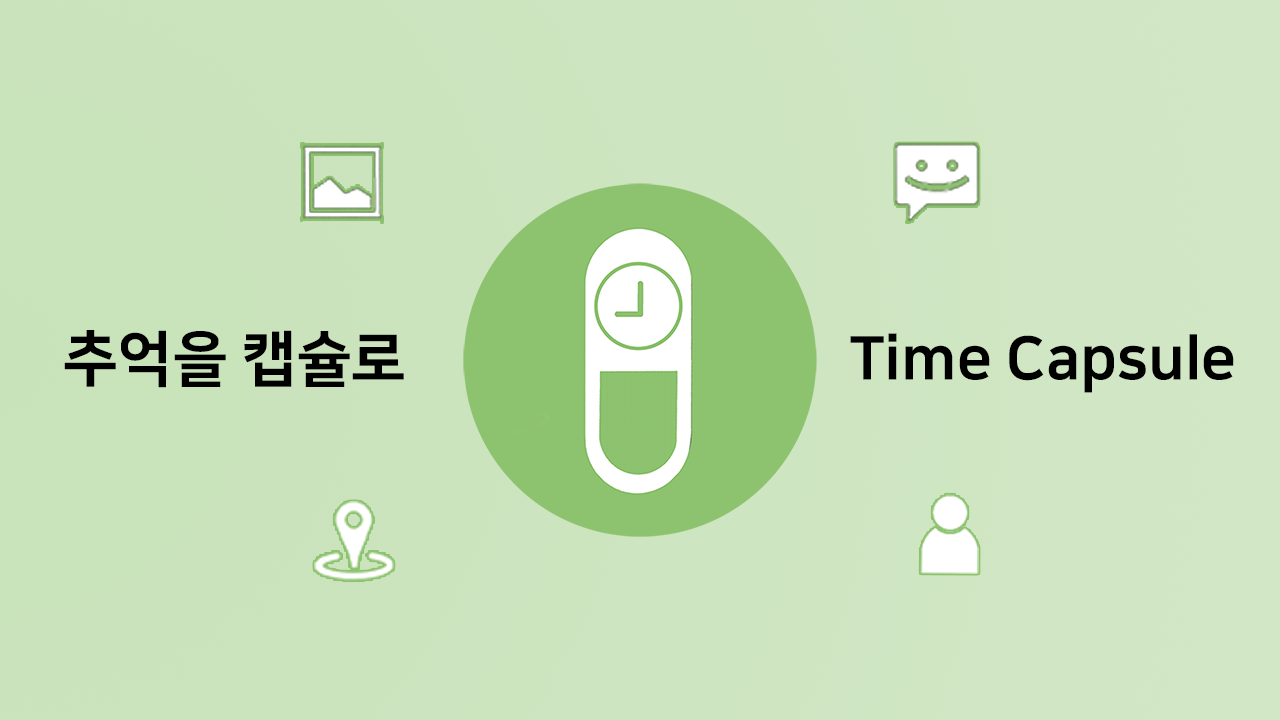
<style>
.page{position:relative;width:1280px;height:720px}
.page>*{position:absolute;margin:0}
.t1{font:60px "NanumSquareOTFEB";color:#000000}
</style>
<div class="page">
<p class="t1" style="left:64px;top:330px;width:340px;height:58px">추억을 캡슐로</p>
<p class="t1" style="left:850px;top:333px;width:384px;height:60px">Time Capsule</p>
</div>
